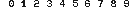
<style>
.page{position:relative;width:140px;height:7px;background:#ffffff}
.page>*{position:absolute;margin:0}
.t1{font:9px "InputSerifNarrow-Bold";letter-spacing:0.64em;color:#181818}
</style>
<div class="page">
<p class="t1" style="left:9px;top:0px;width:120px;height:7px">0123456789</p>
</div>
